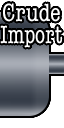
<style>
.page{position:relative;width:64px;height:128px;background:#ffffff}
.page>*{position:absolute;margin:0}
.t1{font:25.8px/22.2px "AmericanTypewriter-Condensed";color:#ffffff;scale:0.93 1}
.t2{font:25.8px/22.2px "AmericanTypewriter-Condensed";color:#ffffff}
</style>
<div class="page">
<p class="t1" style="left:0px;top:3px;width:63px;height:45px;text-align:center"><span class="t2">Crude<br></span>Import</p>
</div>
